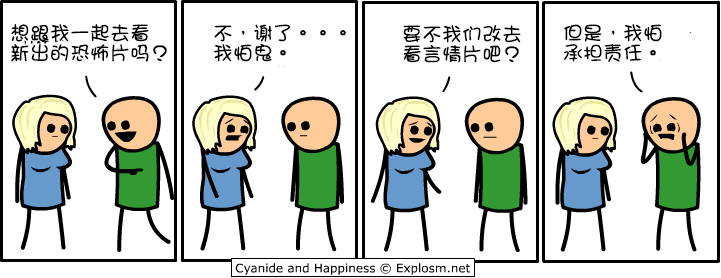
<style>
.page{position:relative;width:721px;height:278px;background:#ffffff}
.page>*{position:absolute;margin:0}
.t1{font:20px/20px "DFGirl";color:#000000}
</style>
<div class="page">
<p class="t1" style="left:11px;top:23px;width:156px;height:39px">想跟我一起去看<br>新出的恐怖片吗？</p>
<p class="t1" style="left:213px;top:24px;width:133px;height:38px">不，谢了。。。<br>我怕鬼。</p>
<p class="t1" style="left:403px;top:25px;width:118px;height:38px">要不我们改去<br>看言情片吧？</p>
<p class="t1" style="left:564px;top:24px;width:98px;height:38px">但是，我怕<br>承担责任。</p>
</div>
